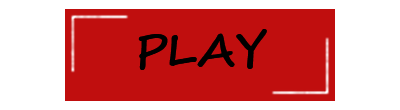
<style>
.page{position:relative;width:400px;height:110px;background:#c00e0e}
.page>*{position:absolute;margin:0}
.t1{font:45px "SegoeScript-Bold";color:#000000}
</style>
<div class="page">
<p class="t1" style="left:138px;top:29px;width:129px;height:41px">PLAY</p>
</div>
